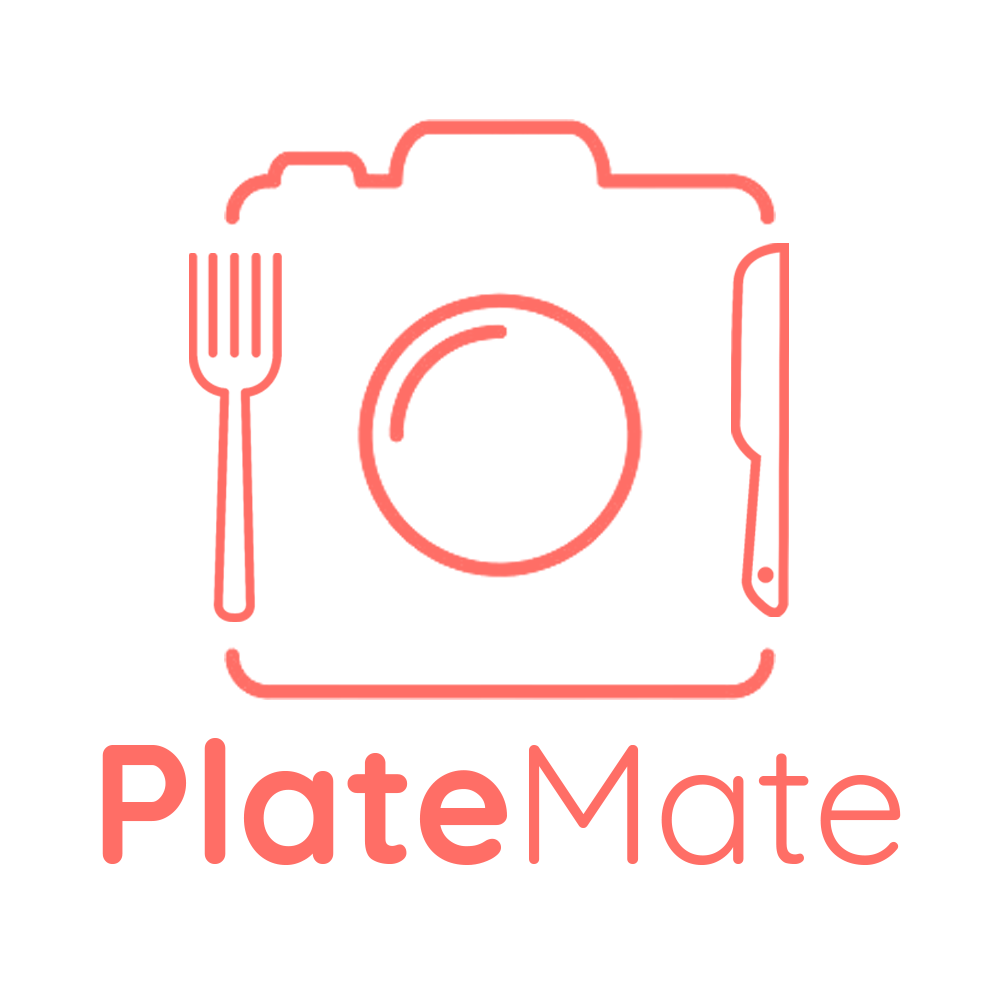
<style>
.page{position:relative;width:1000px;height:1000px;background:#ffffff}
.page>*{position:absolute;margin:0}
.t1{font:170.6px "Quicksand-Bold";color:#ff6e66}
.t2{font:170.6px "Quicksand-Regular";color:#ff6e66}
</style>
<div class="page">
<p class="t1" style="left:102px;top:738px;width:799px;height:127px">Plate<span class="t2">Mate</span></p>
</div>
